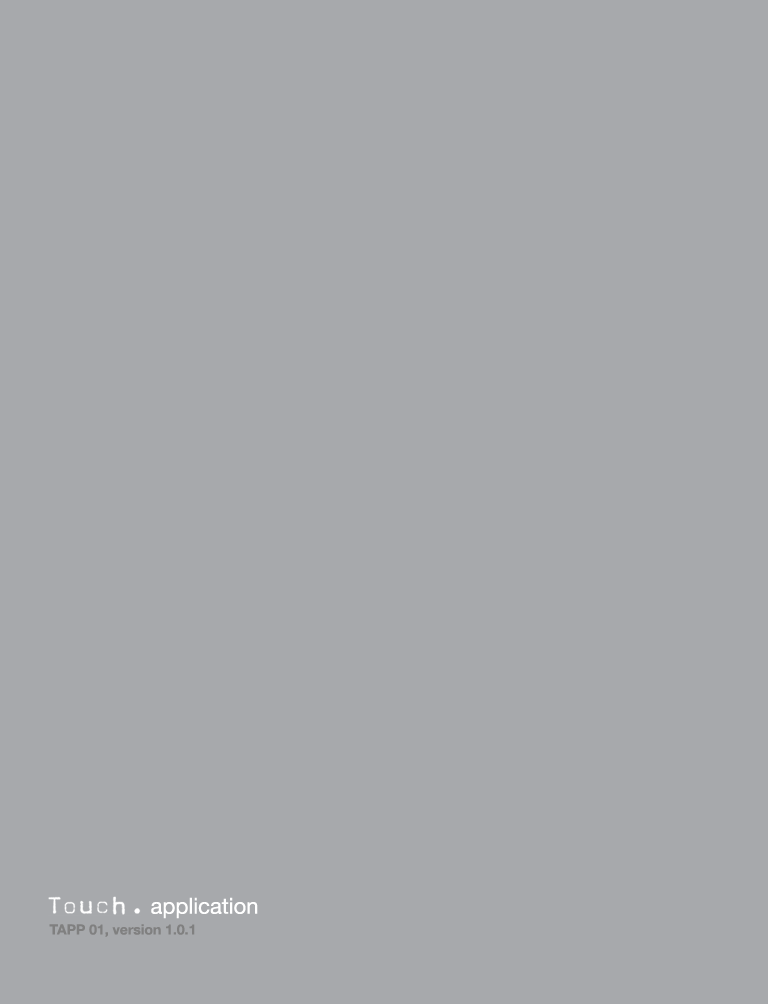
<style>
.page{position:relative;width:768px;height:1004px;background:#a7a9ac}
.page>*{position:absolute;margin:0}
.t1{font:22px "HelveticaNeue-Roman";color:#ffffff}
.t2{font:14px "HelveticaNeue-Bold";color:#808080}
</style>
<div class="page">
<p class="t1" style="left:151px;top:897px;width:107px;height:22px">application</p>
<p class="t2" style="left:49px;top:924px;width:146px;height:13px">TAPP 01, version 1.0.1</p>
</div>
